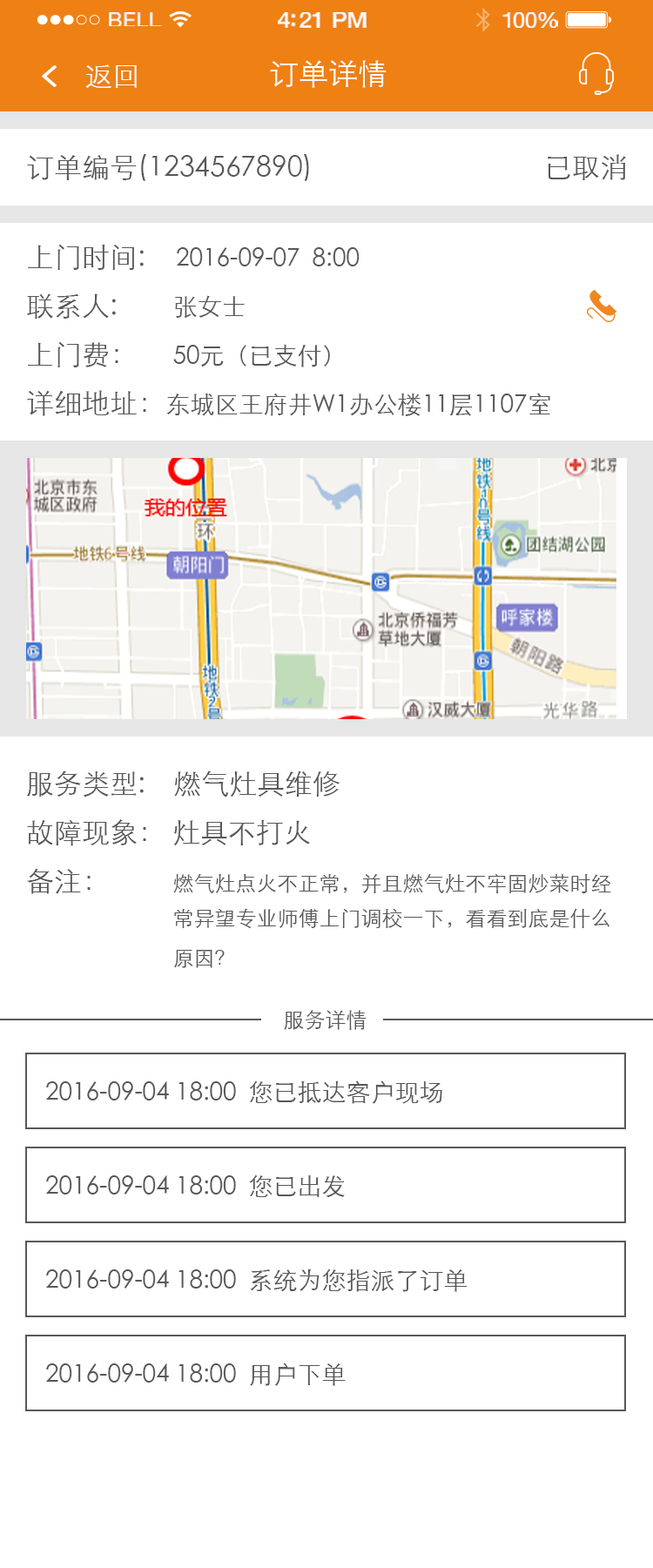
<style>
.page{position:relative;width:653px;height:1568px;background:#ffffff}
.page>*{position:absolute;margin:0}
.t1{font:20.3px "HelveticaNeue";letter-spacing:0.02em;color:#ffffff;scale:1.06 1}
.t2{font:22px "HelveticaNeue-Medium";letter-spacing:-0.02em;color:#ffffff;scale:1.06 1}
.t3{font:21.1px "HelveticaNeue";letter-spacing:-0.02em;color:#ffffff;scale:1.06 1}
.t4{font:27.9px "STXihei";color:#ffffff}
.t5{font:29.6px "STXihei";color:#ffffff}
.t6{font:27.9px "STXihei";color:#595757}
.t7{font:24.4px/48.8px "STXihei";color:#595757}
.t8{font:27.9px/48.8px "STXihei";color:#595757}
.t9{font:24.4px "STXihei";color:#595757}
.t10{font:20.9px/40px "STXihei";color:#595757}
.t11{font:27.9px/40px "STXihei";color:#595757}
.t12{font:20.9px/48.8px "STXihei";color:#595757}
.t13{font:21.3px "STXihei";color:#595757}
</style>
<div class="page">
<p class="t1" style="left:109px;top:12px;width:53px;height:14px">BELL</p>
<p class="t2" style="left:278px;top:12px;width:89px;height:16px">4:21 PM</p>
<p class="t3" style="left:502px;top:12px;width:56px;height:16px">100%</p>
<p class="t4" style="left:85px;top:64px;width:52px;height:24px">返回</p>
<p class="t5" style="left:270px;top:60px;width:117px;height:28px">订单详情</p>
<p class="t6" style="left:27px;top:154px;width:282px;height:27px">订单编号(1234567890)</p>
<p class="t6" style="left:548px;top:154px;width:78px;height:26px">已取消</p>
<p class="t7" style="left:27px;top:244px;width:523px;height:172px"><span class="t8">上门时间:<br>联系人:        </span>张女士<br><span class="t8">上门费：     </span>50元（已支付）<br><span class="t8">详细地址：</span>东城区王府井W1办公楼11层1107室</p>
<p class="t9" style="left:176px;top:247px;width:184px;height:19px">2016-09-07  8:00</p>
<p class="t10" style="left:27px;top:771px;width:584px;height:197px"><span class="t8">服务类型:    燃气灶具维修<br>故障现象： 灶具不打火<br></span><span class="t11">备注：         </span>燃气灶点火不正常，并且燃气灶不牢固炒菜时经<br>                            常异望专业师傅上门调校一下，看看到底是什么<br>                            原因<span class="t12">？</span></p>
<p class="t13" style="left:284px;top:1010px;width:83px;height:20px">服务详情</p>
<p class="t9" style="left:45px;top:1080px;width:397px;height:24px">2016-09-04 18:00  您已抵达客户现场</p>
<p class="t9" style="left:45px;top:1174px;width:300px;height:24px">2016-09-04 18:00  您已出发</p>
<p class="t9" style="left:45px;top:1269px;width:423px;height:23px">2016-09-04 18:00  系统为您指派了订单</p>
<p class="t9" style="left:45px;top:1363px;width:301px;height:23px">2016-09-04 18:00  用户下单</p>
</div>
